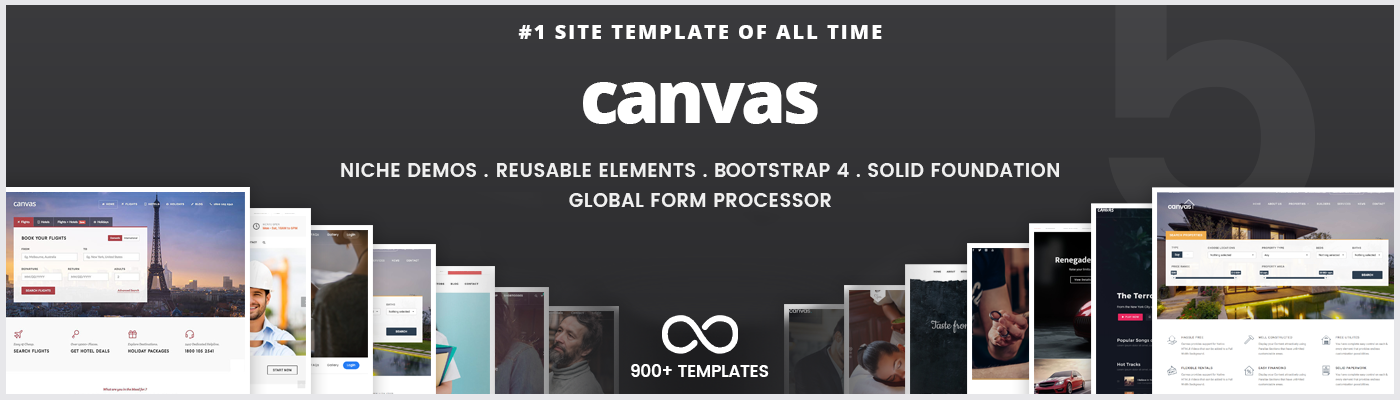
<style>
.page{position:relative;width:1400px;height:400px}
.page>*{position:absolute;margin:0}
.t1{font:20px "OpenSans-Extrabold";letter-spacing:0.1em;color:#ffffff;text-transform:uppercase}
.t2{font:72px "OpenSans-Extrabold";letter-spacing:-0.05em;color:#ffffff}
.t3{font:19px/30px "Poppins-SemiBold";letter-spacing:0.025em;color:#ffffff;text-transform:uppercase}
.t4{font:17.1px "Poppins-SemiBold";letter-spacing:-0.025em;color:#ffffff;text-transform:uppercase}
</style>
<div class="page">
<p class="t1" style="left:518px;top:25px;width:364px;height:14px">#1 Site Template of all Time</p>
<p class="t2" style="left:583px;top:82px;width:235px;height:42px">canvas</p>
<p class="t3" style="left:341px;top:163px;width:718px;height:44px;text-align:center;opacity:0.9">Niche Demos . ReUsable elements . BOOtstrap 4 . solid foundation<br>Global Form Processor</p>
<p class="t4" style="left:631px;top:364px;width:138px;height:13px">900+ Templates</p>
</div>
